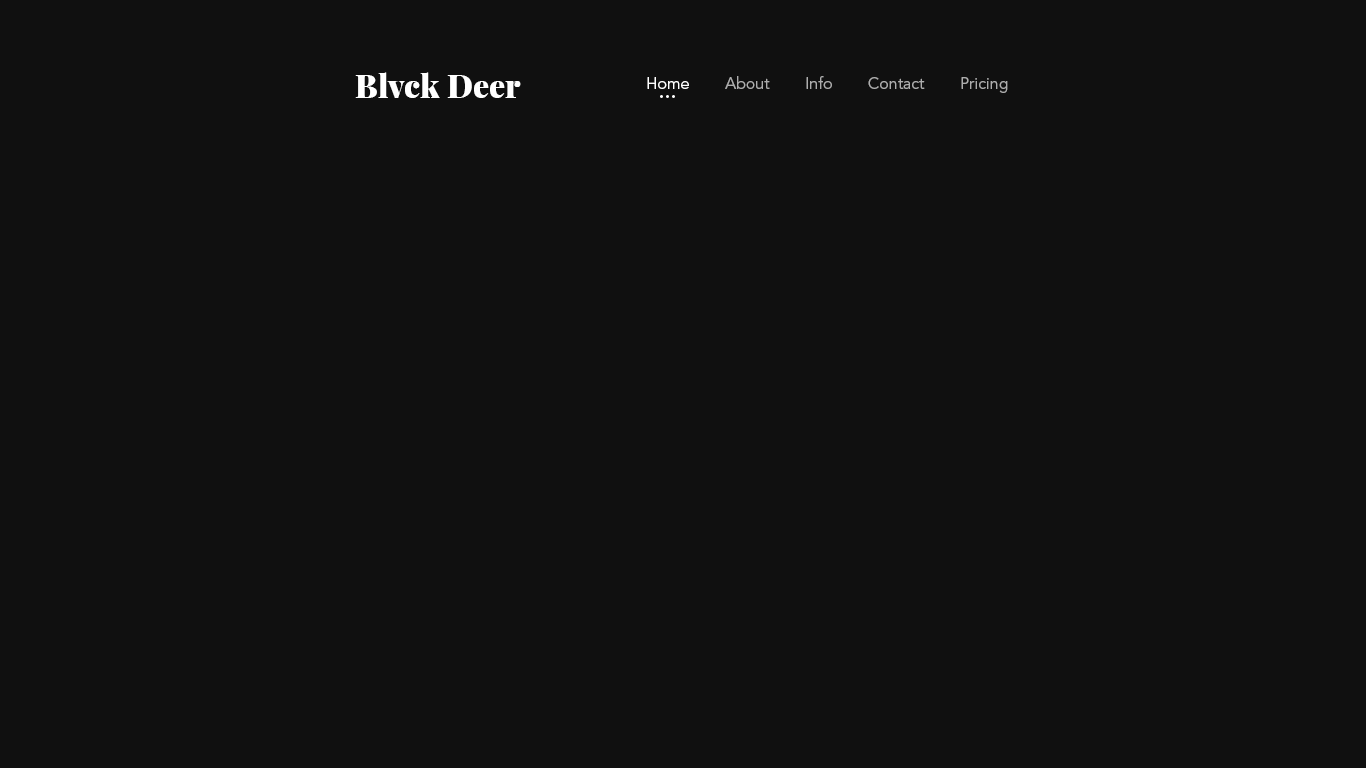
<style>
.page{position:relative;width:1366px;height:768px;background:#101010}
.page>*{position:absolute;margin:0}
.t1{font:32px "PlayfairDisplay-Black";color:#ffffff}
.t2{font:16px "AvenirLTStd-Book";color:#adadad}
.t3{font:16px "AvenirLTStd-Book";color:#ffffff}
</style>
<div class="page">
<p class="t1" style="left:355px;top:72px;width:166px;height:26px">Blvck Deer</p>
<p class="t2" style="left:647px;top:76px;width:361px;height:17px"><span class="t3">Home        </span>About        Info        Contact        Pricing</p>
</div>
